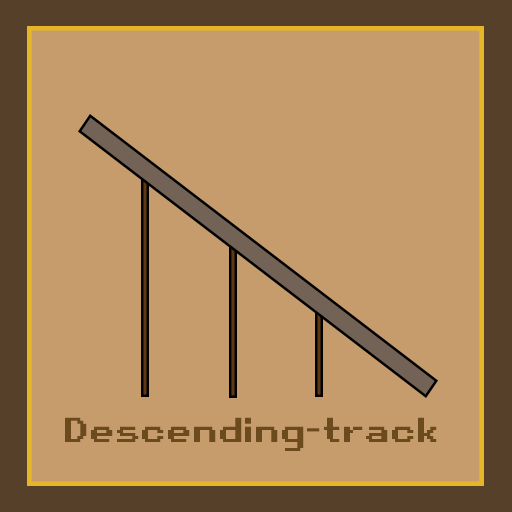
<style>
.page{position:relative;width:512px;height:512px;background:#c69c6d}
.page>*{position:absolute;margin:0}
.t1{font:33.3px "RetroGaming";color:#6b4b1d}
</style>
<div class="page">
<p class="t1" style="left:65px;top:417px;width:372px;height:34px">Descending-track</p>
</div>
